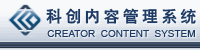
<style>
.page{position:relative;width:200px;height:50px}
.page>*{position:absolute;margin:0}
.t1{font:16px "HeitiCSEG";letter-spacing:0.2em;color:#1d3a64}
.t2{font:10px "ArialMT";color:#1d3a64}
</style>
<div class="page">
<p class="t1" style="left:46px;top:8px;width:150px;height:16px">科创内容管理系统</p>
<p class="t2" style="left:47px;top:30px;width:148px;height:7px">CREATOR  CONTENT  SYSTEM</p>
</div>
